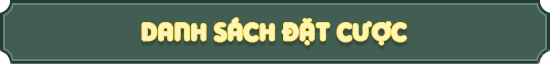
<style>
.page{position:relative;width:550px;height:64px;background:#425d51}
.page>*{position:absolute;margin:0}
.t1{font:24px "SVN-AdamGorry";color:#fff4b9;font-weight:bold}
</style>
<div class="page">
<p class="t1" style="left:142px;top:18px;width:264px;height:27px">Danh sách đặt cược</p>
</div>
